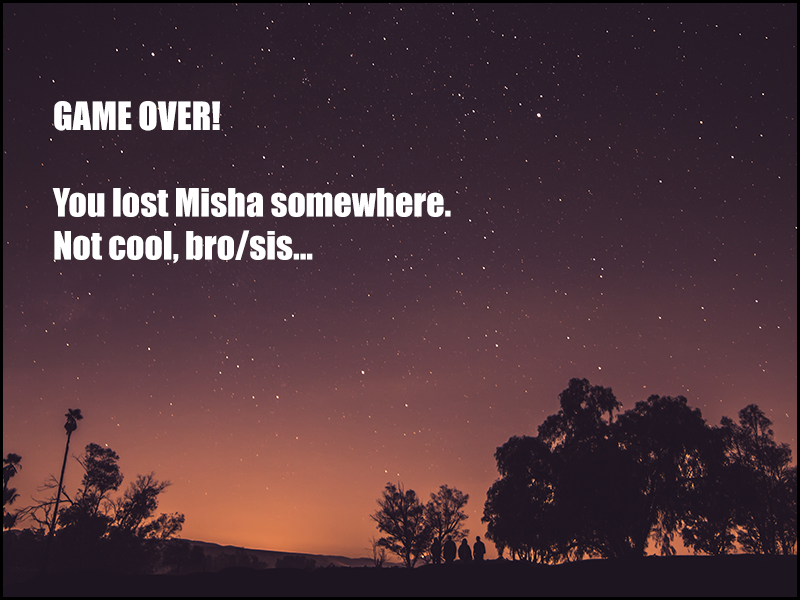
<style>
.page{position:relative;width:800px;height:600px}
.page>*{position:absolute;margin:0}
.t1{font:36px "Impact";color:#ffffff}
</style>
<div class="page">
<p class="t1" style="left:52px;top:101px;width:399px;height:163px">GAME OVER!<br><br>You lost Misha somewhere.<br>Not cool, bro/sis...</p>
</div>
